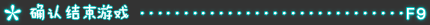
<style>
.page{position:relative;width:430px;height:25px;background:#333333}
.page>*{position:absolute;margin:0}
.t1{font:18px "¢è?";color:#ffffff}
</style>
<div class="page">
<p class="t1" style="left:30px;top:4px;width:99px;height:16px">确认结束游戏</p>
</div>
